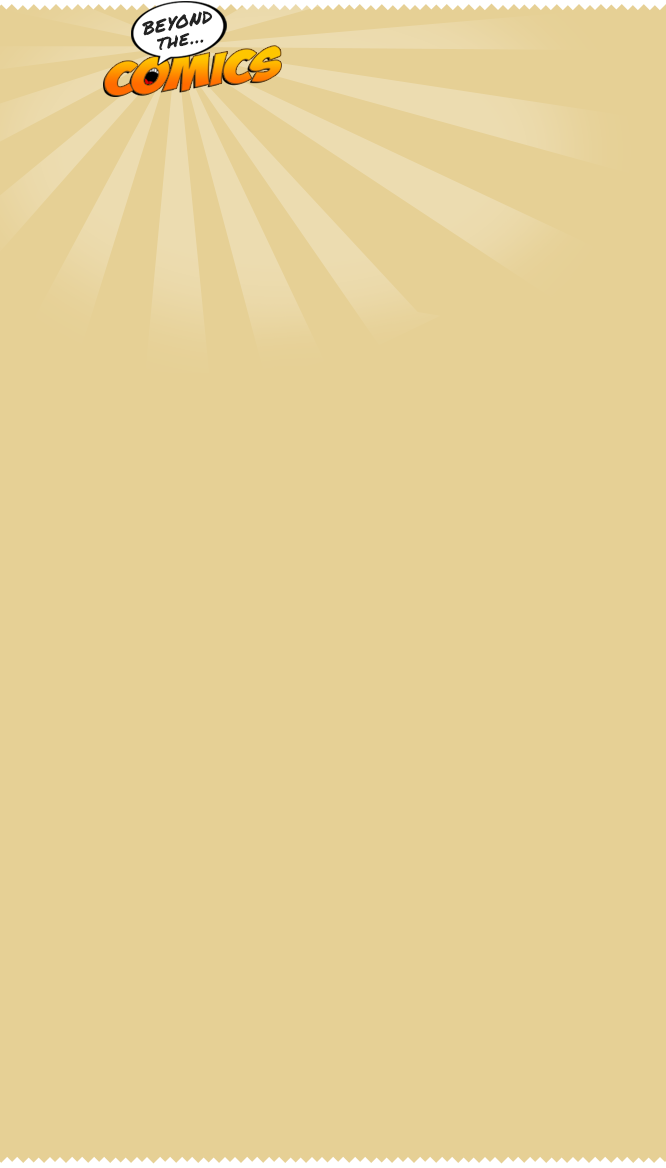
<style>
.page{position:relative;width:666px;height:1168px;background:#e6d095}
.page>*{position:absolute;margin:0}
.t1{font:18px/17.5px "PermanentMarker";letter-spacing:0.01em;color:#232323;text-transform:uppercase;font-style:italic}
.t2{font:16.2px/17.5px "PermanentMarker";letter-spacing:0.01em;color:#232323;text-transform:uppercase;font-style:italic}
</style>
<div class="page">
<p class="t1" style="left:142px;top:11px;width:71px;height:39px;text-align:center;rotate:-11deg">Beyond<br><span class="t2">the</span>...</p>
</div>
